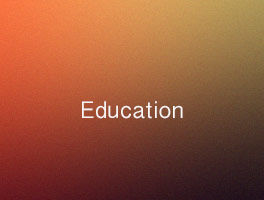
<style>
.page{position:relative;width:264px;height:200px}
.page>*{position:absolute;margin:0}
.t1{font:24px "GujaratiSangamMN";color:#f9f4f4}
</style>
<div class="page">
<p class="t1" style="left:82px;top:101px;width:101px;height:18px">Education</p>
</div>
